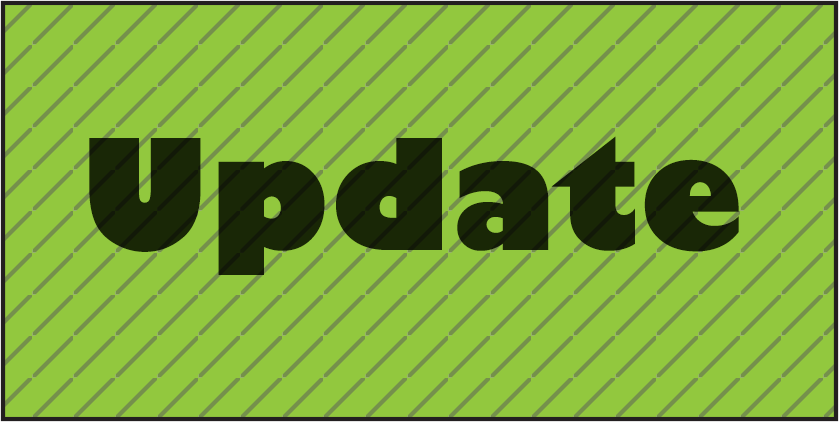
<style>
.page{position:relative;width:839px;height:422px;background:#92c83e}
.page>*{position:absolute;margin:0}
.t1{font:150px "GillSans-UltraBold";color:#192706}
</style>
<div class="page">
<p class="t1" style="left:89px;top:136px;width:650px;height:139px">Update</p>
</div>
